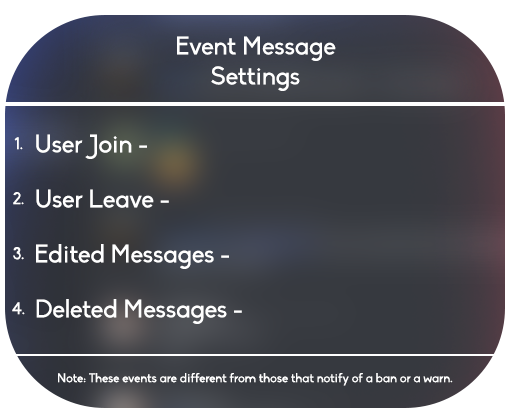
<style>
.page{position:relative;width:510px;height:420px}
.page>*{position:absolute;margin:0}
.t1{font:25px "Biko";color:#ffffff}
.t2{font:16.7px "Biko";color:#ffffff}
.t3{font:12.5px "Biko";color:#ffffff}
</style>
<div class="page">
<p class="t1" style="left:177px;top:36px;width:159px;height:55px;text-align:center">Event Message<br>Settings</p>
<p class="t2" style="left:14px;top:137px;width:9px;height:13px">1.</p>
<p class="t1" style="left:36px;top:134px;width:111px;height:25px">User Join -</p>
<p class="t2" style="left:13px;top:192px;width:11px;height:13px">2.</p>
<p class="t1" style="left:36px;top:189px;width:133px;height:19px">User Leave -</p>
<p class="t1" style="left:36px;top:244px;width:193px;height:25px">Edited Messages -</p>
<p class="t2" style="left:13px;top:247px;width:11px;height:13px">3.</p>
<p class="t2" style="left:12px;top:302px;width:13px;height:13px">4.</p>
<p class="t1" style="left:36px;top:299px;width:206px;height:25px">Deleted Messages -</p>
<p class="t3" style="left:58px;top:373px;width:395px;height:13px">Note: These events are different from those that notify of a ban or a warn.</p>
</div>
